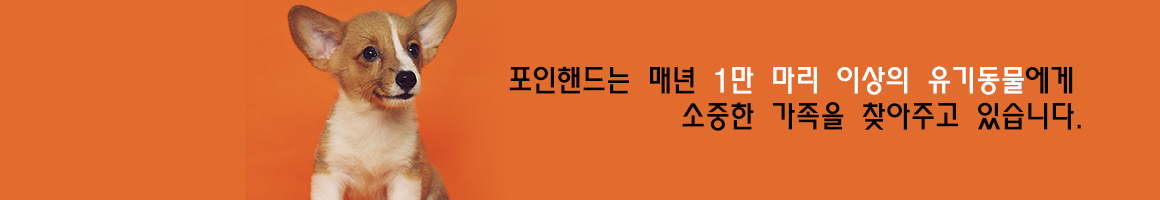
<style>
.page{position:relative;width:1160px;height:200px;background:#e16c2d}
.page>*{position:absolute;margin:0}
.t1{font:30px "MoeumTR-HM";color:#000000}
.t2{font:30px "MoeumTR-HM";color:#ffffff}
</style>
<div class="page">
<p class="t1" style="left:509px;top:66px;width:572px;height:65px;text-align:center">포인핸드는 매년 <span class="t2">1만 마리 이상의 유기동물</span>에게<br>           소중한 가족을 찾아주고 있습니다.</p>
</div>
